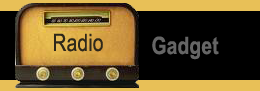
<style>
.page{position:relative;width:260px;height:91px;background:#000000}
.page>*{position:absolute;margin:0}
.t1{font:24px "ArialMT";letter-spacing:0.01em;color:#2e281a;scale:0.8 1}
.t2{font:24px "Arial-BoldMT";letter-spacing:0.01em;color:#656565;scale:0.8 1}
</style>
<div class="page">
<p class="t1" style="left:54px;top:33px;width:49px;height:19px">Radio</p>
<p class="t2" style="left:152px;top:36px;width:67px;height:24px"><span class="t1"> </span>Gadget</p>
</div>
